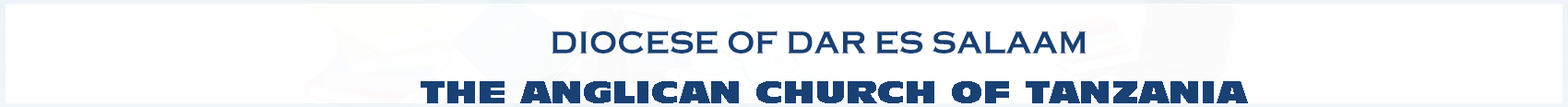
<style>
.page{position:relative;width:1568px;height:107px;background:#ffffff}
.page>*{position:absolute;margin:0}
.t1{font:29.5px "Ironclad-";color:#194174}
.t2{font:29.5px "Incised901BT-Nord";color:#194174}
</style>
<div class="page">
<p class="t1" style="left:552px;top:30px;width:534px;height:24px">DIOCESE OF DAR ES SALAAM</p>
<p class="t2" style="left:421px;top:81px;width:827px;height:22px">THE ANGLICAN CHURCH OF TANZANIA</p>
</div>
